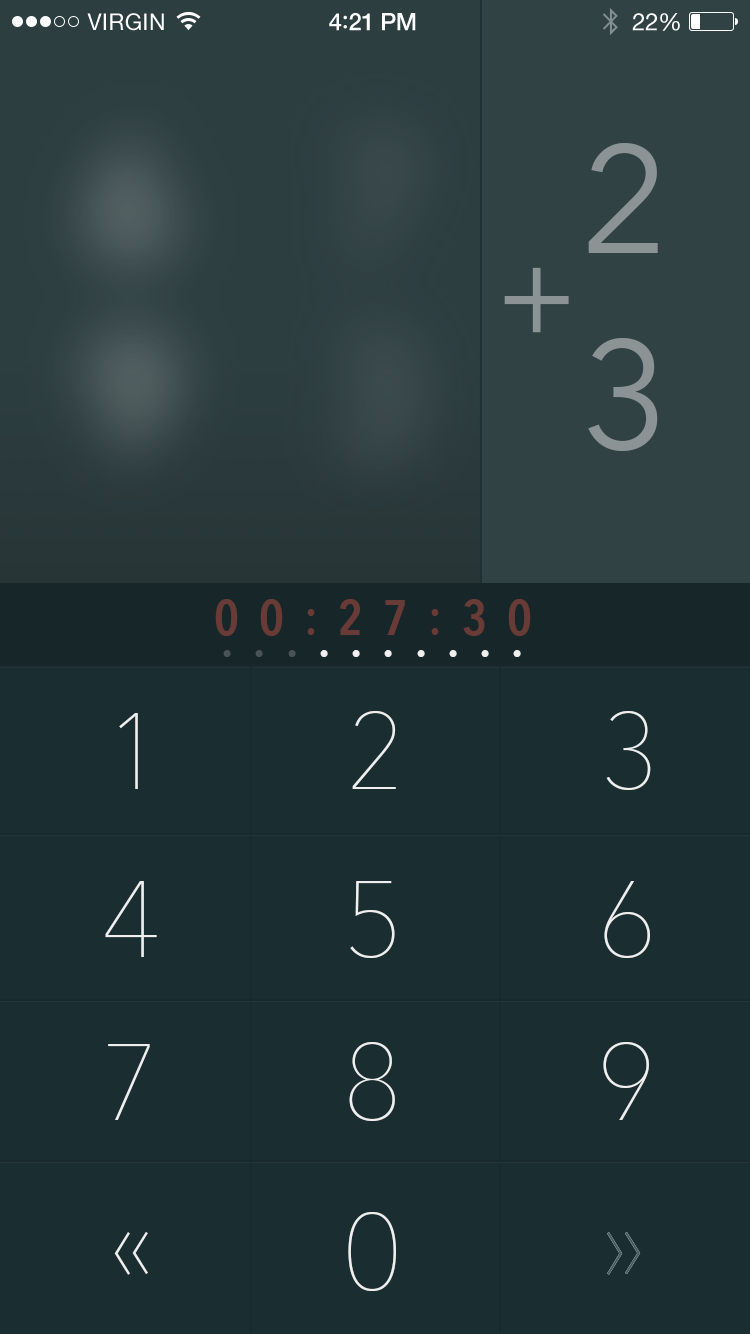
<style>
.page{position:relative;width:750px;height:1334px;background:#1a2d30}
.page>*{position:absolute;margin:0}
.t1{font:152.4px "AvenirNext-Regular";letter-spacing:0.4em;color:#8c9394}
.t2{font:125px "AvenirNext-Regular";letter-spacing:0.4em;color:#8c9394}
.t3{font:50px "AvenirNextCondensed-DemiBold";letter-spacing:0.4em;color:#683b37}
.t4{font:50px "AvenirNextCondensed-DemiBold";letter-spacing:0.4em;color:#efefef}
.t5{font:50px "AvenirNextCondensed-DemiBold";letter-spacing:0.4em;color:#475355}
.t6{font:108.4px "AvenirNext-UltraLight";letter-spacing:0.4em;color:#efefef}
.t7{font:108.4px "AvenirNext-UltraLight";letter-spacing:0.4em;color:#475e61}
</style>
<div class="page">
<p class="t1" style="left:588px;top:143px;width:70px;height:110px">2</p>
<p class="t2" style="left:504px;top:267px;width:65px;height:66px">+</p>
<p class="t1" style="left:588px;top:338px;width:70px;height:113px">3</p>
<p class="t3" style="left:214px;top:599px;width:316px;height:37px">00:25:30</p>
<p class="t3" style="left:214px;top:599px;width:316px;height:37px">00:25:30</p>
<p class="t3" style="left:215px;top:599px;width:316px;height:37px">00:27:30</p>
<p class="t4" style="left:223px;top:650px;width:298px;height:7px"><span class="t5">...</span>.......</p>
<p class="t4" style="left:223px;top:650px;width:298px;height:7px"><span class="t5">...</span>.......</p>
<p class="t4" style="left:223px;top:650px;width:298px;height:7px"><span class="t5">...</span>.......</p>
<p class="t6" style="left:119px;top:713px;width:19px;height:76px">1</p>
<p class="t6" style="left:119px;top:713px;width:19px;height:76px">1</p>
<p class="t6" style="left:352px;top:711px;width:44px;height:78px">2</p>
<p class="t6" style="left:352px;top:711px;width:44px;height:78px">2</p>
<p class="t6" style="left:606px;top:711px;width:45px;height:79px">3</p>
<p class="t6" style="left:606px;top:711px;width:45px;height:79px">3</p>
<p class="t6" style="left:105px;top:881px;width:52px;height:76px">4</p>
<p class="t6" style="left:105px;top:881px;width:52px;height:76px">4</p>
<p class="t6" style="left:350px;top:881px;width:45px;height:77px">5</p>
<p class="t6" style="left:350px;top:881px;width:45px;height:77px">5</p>
<p class="t6" style="left:604px;top:881px;width:46px;height:77px">6</p>
<p class="t6" style="left:604px;top:881px;width:46px;height:77px">6</p>
<p class="t6" style="left:108px;top:1044px;width:42px;height:76px">7</p>
<p class="t6" style="left:108px;top:1044px;width:42px;height:76px">7</p>
<p class="t6" style="left:349px;top:1042px;width:46px;height:79px">8</p>
<p class="t6" style="left:349px;top:1042px;width:46px;height:79px">8</p>
<p class="t6" style="left:603px;top:1042px;width:46px;height:78px">9</p>
<p class="t6" style="left:603px;top:1042px;width:46px;height:78px">9</p>
<p class="t6" style="left:348px;top:1212px;width:48px;height:79px">0</p>
<p class="t6" style="left:348px;top:1212px;width:48px;height:79px">0</p>
<p class="t6" style="left:114px;top:1232px;width:34px;height:43px">«</p>
<p class="t6" style="left:114px;top:1232px;width:34px;height:43px">«</p>
<p class="t7" style="left:607px;top:1232px;width:34px;height:43px">»</p>
<p class="t7" style="left:607px;top:1232px;width:34px;height:43px">»</p>
</div>
